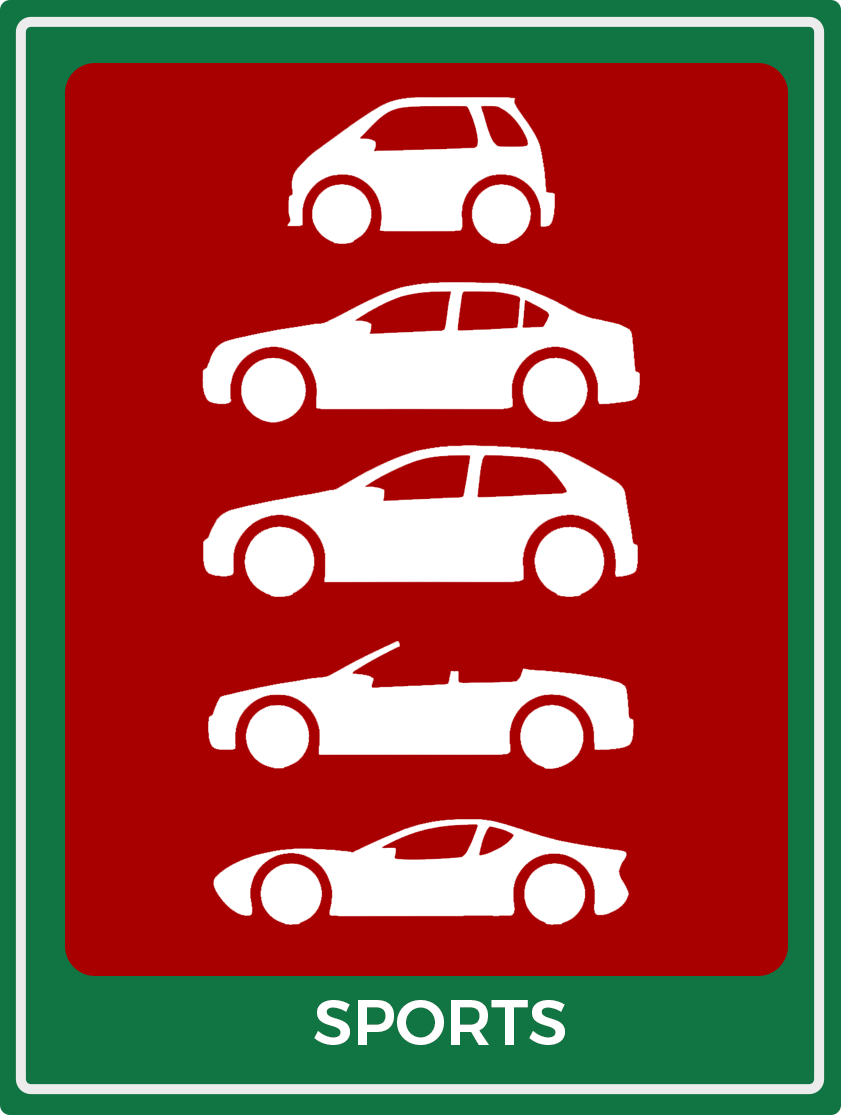
<style>
.page{position:relative;width:841px;height:1115px;background:#a80000}
.page>*{position:absolute;margin:0}
.t1{font:63px "ArgentumSans-Medium";color:#ffffff}
</style>
<div class="page">
<p class="t1" style="left:314px;top:1000px;width:251px;height:45px">SPORTS</p>
</div>
